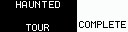
<style>
.page{position:relative;width:128px;height:32px;background:#000000}
.page>*{position:absolute;margin:0}
.t1{font:8px "Terminal";letter-spacing:0.075em;color:#ffffff}
.t2{font:8px "Terminal";color:#ffffff}
.t3{font:8px "Terminal";color:#000000}
</style>
<div class="page">
<p class="t1" style="left:16px;top:1px;width:44px;height:7px">HAUNTED</p>
<p class="t2" style="left:26px;top:24px;width:23px;height:7px">TOUR</p>
<p class="t3" style="left:79px;top:21px;width:47px;height:7px"><span class="t2"><br></span>COMPLETE</p>
</div>
